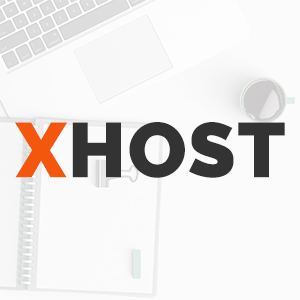
<style>
.page{position:relative;width:300px;height:300px;background:#fbfbfb}
.page>*{position:absolute;margin:0}
.t1{font:76.9px "Raleway-Black";letter-spacing:0.025em;color:#333333}
.t2{font:76.9px "Raleway-Black";letter-spacing:0.025em;color:#f2570d}
</style>
<div class="page">
<p class="t1" style="left:15px;top:122px;width:270px;height:56px"><span class="t2">X</span>HOST</p>
</div>
